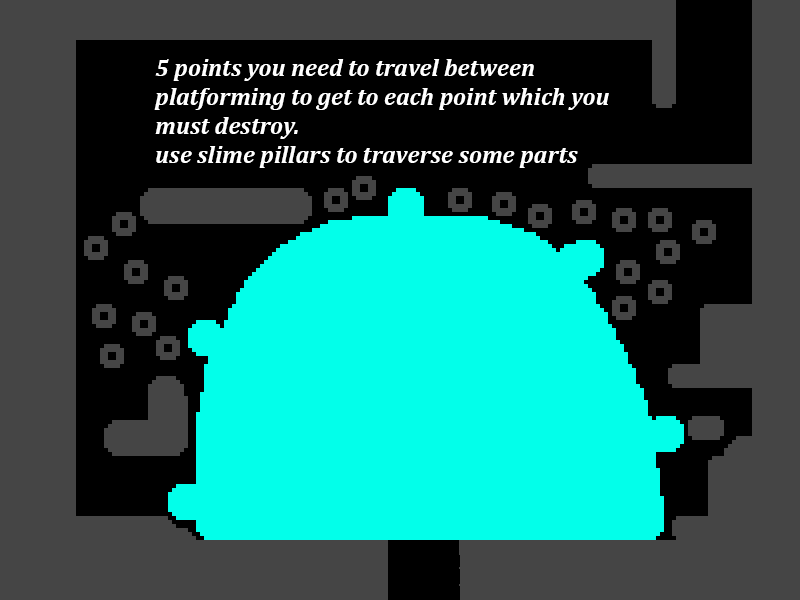
<style>
.page{position:relative;width:800px;height:600px;background:#454545}
.page>*{position:absolute;margin:0}
.t1{font:24px "Cambria-BoldItalic";color:#ffffff}
</style>
<div class="page">
<p class="t1" style="left:154px;top:59px;width:455px;height:109px">5 points you need to travel between<br>platforming to get to each point which you<br>must destroy.<br>use slime pillars to traverse some parts</p>
</div>
